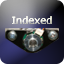
<style>
.page{position:relative;width:64px;height:64px}
.page>*{position:absolute;margin:0}
.t1{font:10px "Verdana"}
</style>
<div class="page">
<p class="t1" style="left:12px;top:16px;width:40px;height:8px">Indexed</p>
</div>
